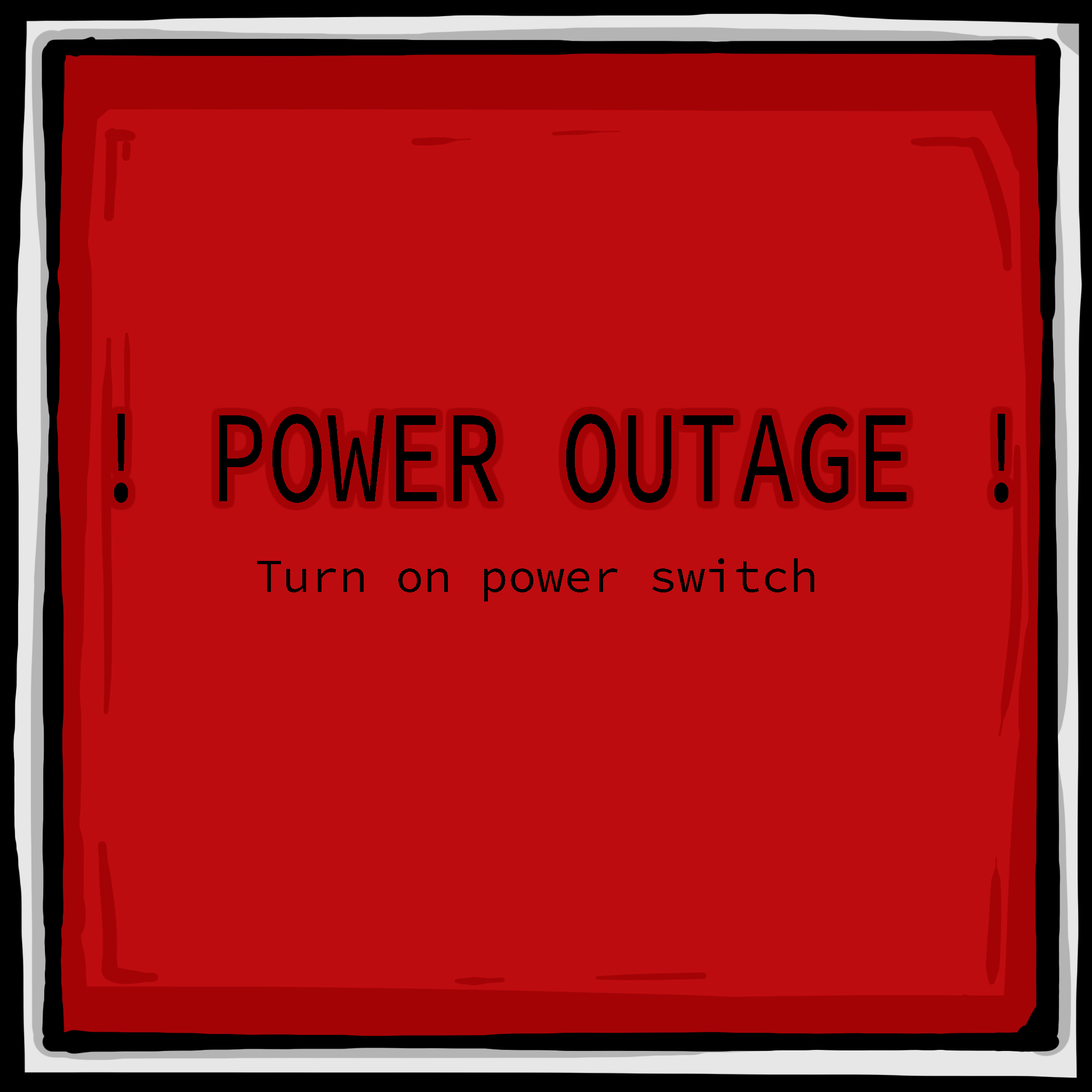
<style>
.page{position:relative;width:1092px;height:1092px;background:#bd0c0f}
.page>*{position:absolute;margin:0}
.t1{font:130.6px "SourceCodePro-Regular";color:#000000;font-weight:bold;scale:0.75 1}
.t2{font:46.9px "SourceCodePro-Regular";color:#000000;font-weight:bold}
</style>
<div class="page">
<p class="t1" style="left:114px;top:414px;width:895px;height:89px">! POWER OUTAGE !</p>
<p class="t2" style="left:257px;top:558px;width:557px;height:43px">Turn on power switch</p>
</div>
